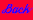
<style>
.page{position:relative;width:33px;height:20px;background:#fb042d}
.page>*{position:absolute;margin:0}
.t1{font:9.6px "Streetwear";color:#2501fe;scale:0.93 1}
</style>
<div class="page">
<p class="t1" style="left:1px;top:4px;width:32px;height:10px">Back</p>
</div>
